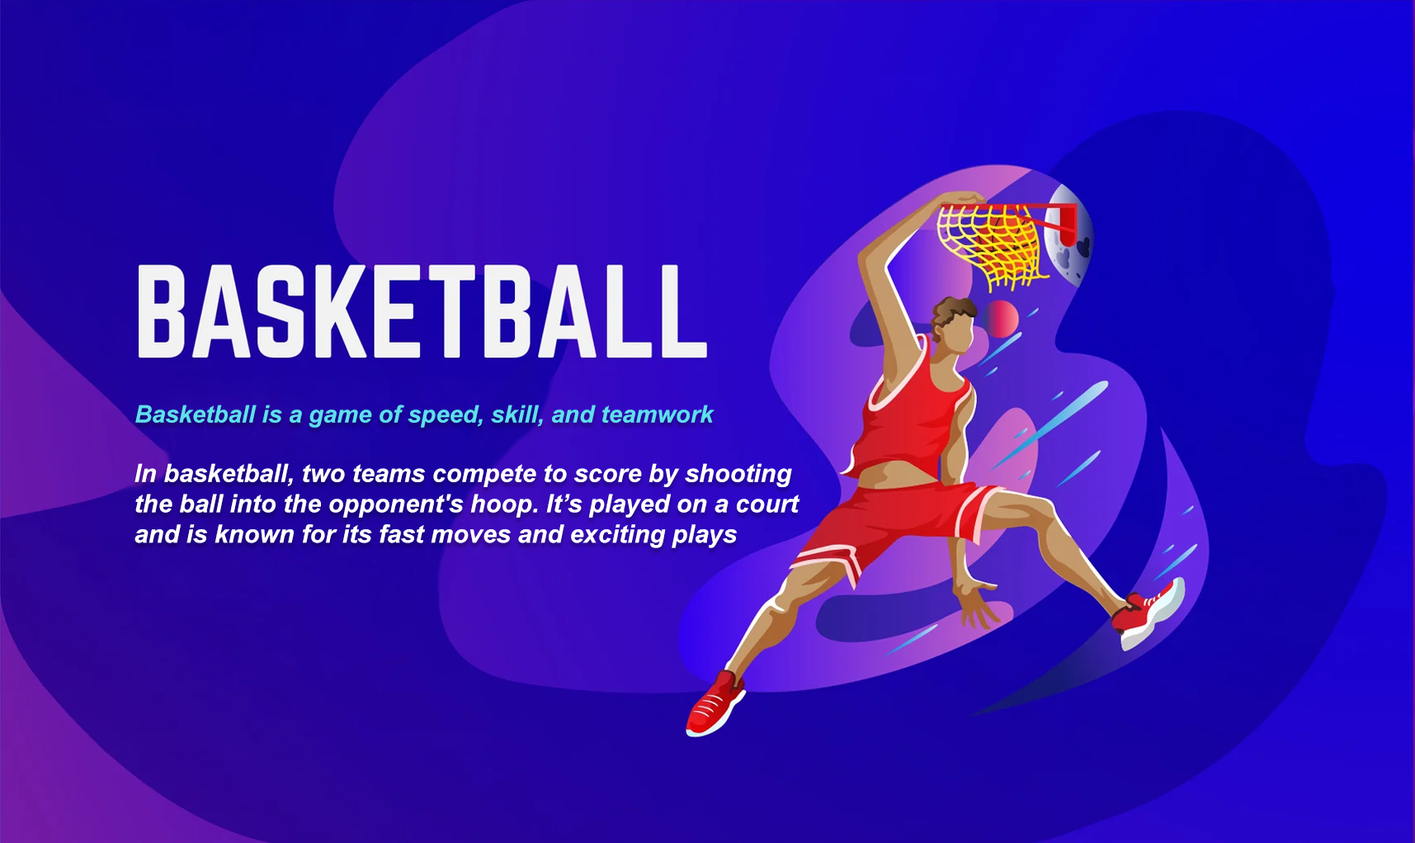
<style>
.page{position:relative;width:1415px;height:843px}
.page>*{position:absolute;margin:0}
.t1{font:24.1px "Arial-BoldItalicMT";color:#5fdfee}
.t2{font:25.3px "Arial-BoldItalicMT";color:#ffffff}
</style>
<div class="page">
<p class="t1" style="left:135px;top:404px;width:580px;height:23px">Basketball is a game of speed, skill, and teamwork</p>
<p class="t2" style="left:135px;top:463px;width:665px;height:85px">In basketball, two teams compete to score by shooting<br>the ball into the opponent's hoop. It’s played on a court<br>and is known for its fast moves and exciting plays</p>
</div>
